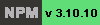
<style>
.page{position:relative;width:100px;height:25px;background:#61dd78}
.page>*{position:absolute;margin:0}
.t1{font:18px "Arial-BoldMT";letter-spacing:0.005em;color:#b6b3b6;font-variant:small-caps;font-weight:bold;scale:0.96 1}
.t2{font:11.1px "ArialMT";letter-spacing:-0.015em;color:#020202;font-variant:small-caps;font-weight:bold}
</style>
<div class="page">
<p class="t1" style="left:5px;top:7px;width:33px;height:11px">npm</p>
<p class="t2" style="left:45px;top:9px;width:52px;height:8px">v 3.10.10</p>
</div>
